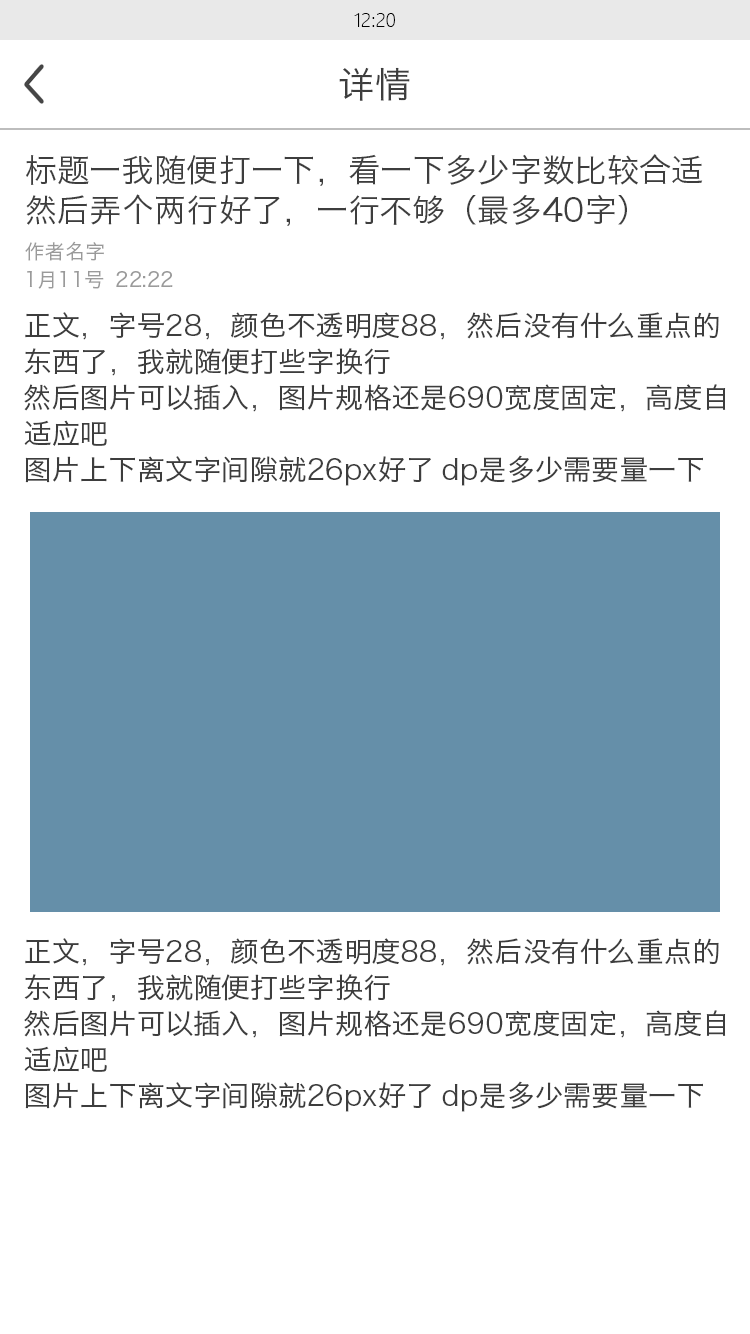
<style>
.page{position:relative;width:750px;height:1334px;background:#ffffff}
.page>*{position:absolute;margin:0}
.t1{font:18px "MicrosoftYaHeiLight";color:#000000}
.t2{font:36px "HiraginoSansGB-W3";color:#3d3d3d}
.t3{font:32px/40px "HiraginoSansGB-W3";color:#3d3d3d}
.t4{font:20px "HiraginoSansGB-W3";color:#9a9a9a}
.t5{font:28px/36px "HiraginoSansGB-W3";color:#3d3d3d}
</style>
<div class="page">
<p class="t1" style="left:354px;top:13px;width:41px;height:14px">12:20</p>
<p class="t2" style="left:339px;top:67px;width:71px;height:34px">详情</p>
<p class="t3" style="left:26px;top:154px;width:677px;height:72px">标题一我随便打一下，看一下多少字数比较合适<br>然后弄个两行好了，一行不够（最多40字）</p>
<p class="t4" style="left:25px;top:241px;width:79px;height:20px">作者名字</p>
<p class="t4" style="left:27px;top:270px;width:146px;height:19px">1月11号  22:22</p>
<p class="t5" style="left:24px;top:312px;width:702px;height:174px">正文，字号28，颜色不透明度88，然后没有什么重点的<br>东西了，我就随便打些字换行<br>然后图片可以插入，图片规格还是690宽度固定，高度自<br>适应吧<br>图片上下离文字间隙就26px好了 dp是多少需要量一下</p>
<p class="t5" style="left:24px;top:938px;width:702px;height:174px">正文，字号28，颜色不透明度88，然后没有什么重点的<br>东西了，我就随便打些字换行<br>然后图片可以插入，图片规格还是690宽度固定，高度自<br>适应吧<br>图片上下离文字间隙就26px好了 dp是多少需要量一下</p>
</div>
